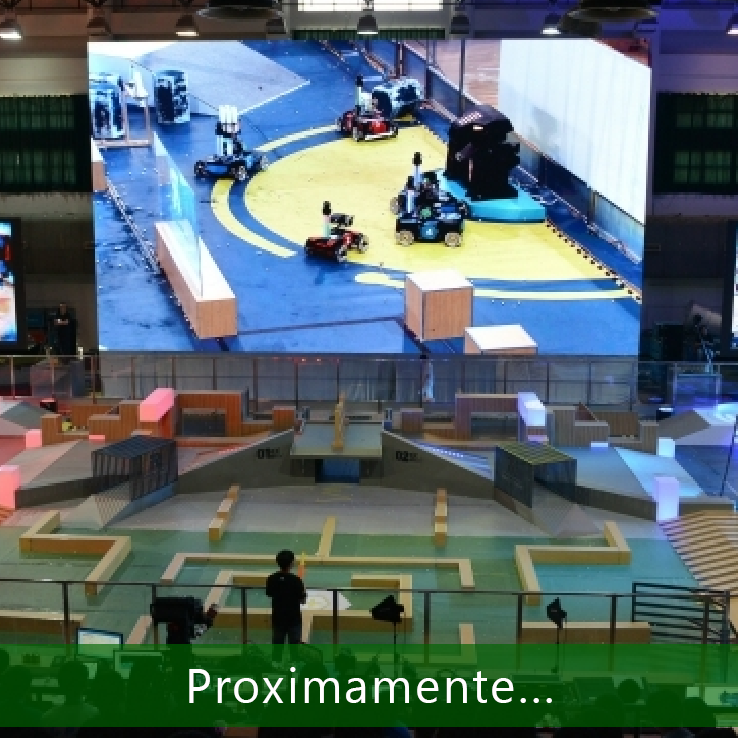
<style>
.page{position:relative;width:738px;height:738px}
.page>*{position:absolute;margin:0}
.t1{font:48px "SegoeUI";letter-spacing:0.05em;color:#fffefe}
</style>
<div class="page">
<p class="t1" style="left:189px;top:667px;width:363px;height:36px">Proximamente...</p>
</div>
